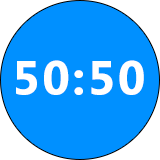
<style>
.page{position:relative;width:160px;height:160px;background:#0090ff}
.page>*{position:absolute;margin:0}
.t1{font:48px "SegoeUI-Bold";letter-spacing:0.05em;color:#ffffff}
</style>
<div class="page">
<p class="t1" style="left:16px;top:60px;width:128px;height:35px">50:50</p>
</div>
